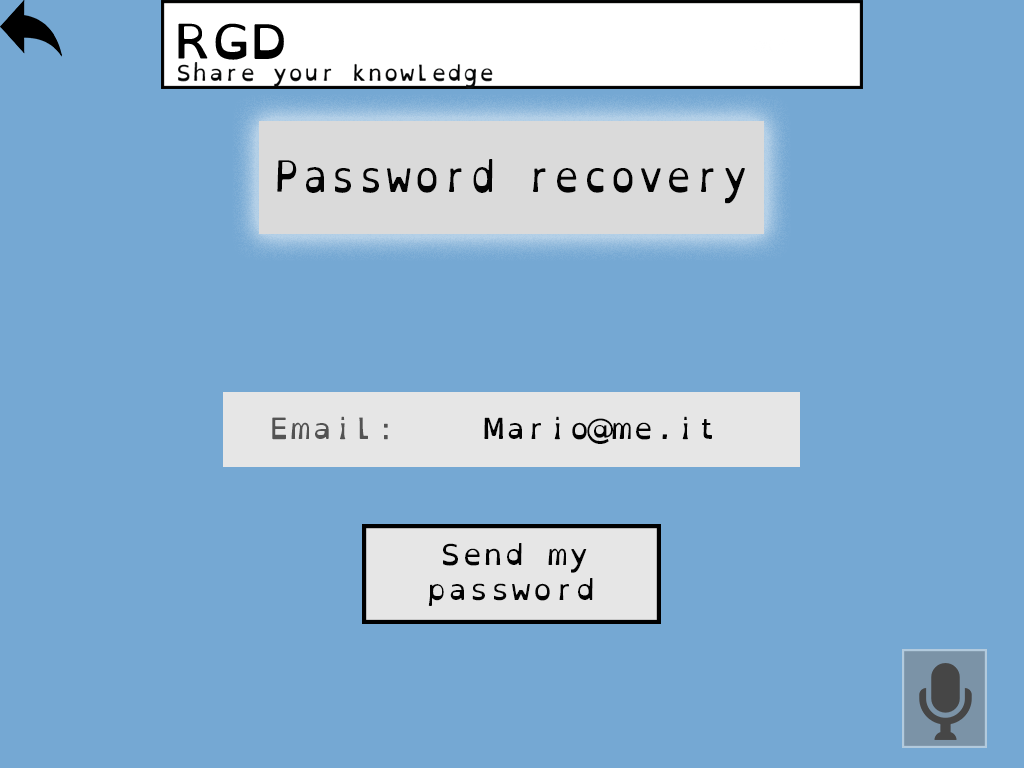
<style>
.page{position:relative;width:1024px;height:768px;background:#75a8d3}
.page>*{position:absolute;margin:0}
.t1{font:43.4px "OpenDyslexicMono-Regular";color:#030303;scale:0.88 1}
.t2{font:29.2px "OpenDyslexicMono-Regular";color:#535353}
.t3{font:29.2px "OpenDyslexicMono-Regular";color:#030303}
</style>
<div class="page">
<p class="t1" style="left:277px;top:159px;width:468px;height:45px">Password recovery <br>recpveru</p>
<p class="t2" style="left:272px;top:416px;width:116px;height:24px">Email:</p>
<p class="t3" style="left:484px;top:416px;width:228px;height:28px">Mario@me.it</p>
<p class="t3" style="left:428px;top:543px;width:165px;height:63px">Send my    password</p>
</div>
